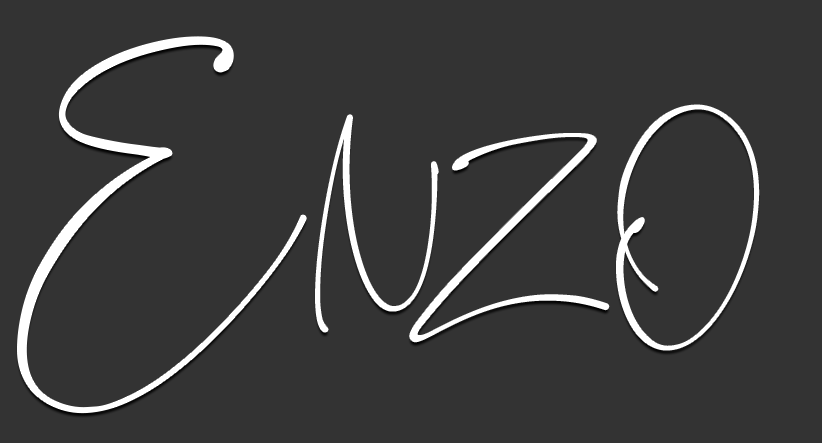
<style>
.page{position:relative;width:822px;height:443px;background:#333333}
.page>*{position:absolute;margin:0}
.t1{font:125px "RomanticallyFreeForPersonal";color:#ffffff}
.t2{font:72px "RomanticallyFreeForPersonal";color:#ffffff}
.t3{font:90px "RomanticallyFreeForPersonal";color:#ffffff}
</style>
<div class="page">
<p class="t1" style="left:18px;top:37px;width:288px;height:376px;text-align:center">E</p>
<p class="t2" style="left:316px;top:105px;width:443px;height:245px;text-align:center">NZ <span class="t3">O</span></p>
</div>
